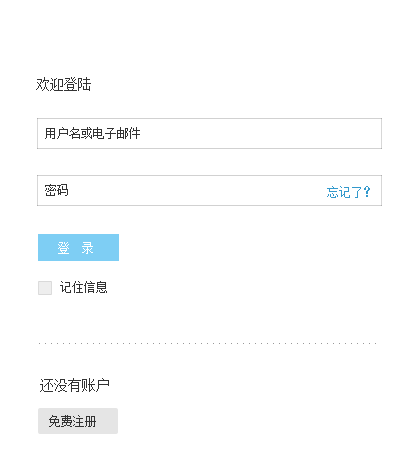
<style>
.page{position:relative;width:420px;height:456px;background:#ffffff}
.page>*{position:absolute;margin:0}
.t1{font:14px "SimSun";color:#333333}
.t2{font:12px "SimSun";color:#333333}
.t3{font:12px "SimSun";color:#3399cc}
.t4{font:12px "SimSun";color:#ffffff}
.t5{font:12px "SimSun";color:#999999}
</style>
<div class="page">
<p class="t1" style="left:36px;top:77px;width:55px;height:14px">欢迎登陆</p>
<p class="t2" style="left:45px;top:127px;width:95px;height:12px">用户名或电子邮件</p>
<p class="t2" style="left:45px;top:184px;width:23px;height:12px">密码</p>
<p class="t3" style="left:327px;top:186px;width:43px;height:12px">忘记了？</p>
<p class="t4" style="left:58px;top:242px;width:35px;height:12px">登  录</p>
<p class="t2" style="left:60px;top:281px;width:47px;height:12px">记住信息</p>
<p class="t5" style="left:39px;top:343px;width:337px;height:1px">.........................................................</p>
<p class="t1" style="left:40px;top:378px;width:69px;height:14px">还没有账户</p>
<p class="t2" style="left:49px;top:415px;width:47px;height:12px">免费注册</p>
</div>
